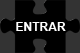
<style>
.page{position:relative;width:80px;height:53px;background:#000000}
.page>*{position:absolute;margin:0}
.t1{font:12.2px "Arial-BoldMT";color:#ffffff}
</style>
<div class="page">
<p class="t1" style="left:16px;top:22px;width:50px;height:9px">ENTRAR</p>
</div>
